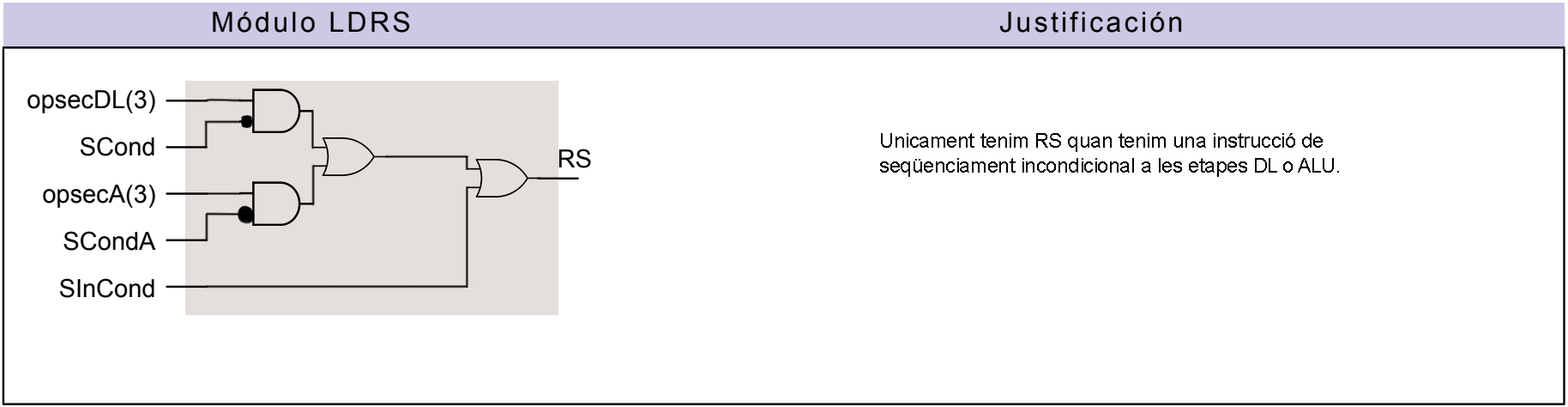
<style>
.page{position:relative;width:1568px;height:407px;background:#ffffff}
.page>*{position:absolute;margin:0}
.t1{font:20.6px "ArialMT";letter-spacing:-0.02em;color:#000000}
</style>
<div class="page">
<p class="t1" style="left:880px;top:133px;width:459px;height:44px">Unicament tenim RS quan tenim una instrucció de<br>seqüenciament incondicional a les etapes DL o ALU.</p>
</div>
